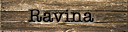
<style>
.page{position:relative;width:128px;height:32px}
.page>*{position:absolute;margin:0}
.t1{font:18px "AmericanTypewriter";color:#000000;font-weight:bold}
</style>
<div class="page">
<p class="t1" style="left:28px;top:9px;width:66px;height:13px">Ravina</p>
</div>
